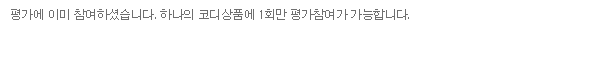
<style>
.page{position:relative;width:594px;height:66px;background:#ffffff}
.page>*{position:absolute;margin:0}
.t1{font:12px "Dotum";letter-spacing:-0.05em;color:#6f6f6f}
</style>
<div class="page">
<p class="t1" style="left:11px;top:9px;width:398px;height:11px">평가에 이미 참여하셨습니다. 하나의 코디상품에 1회만 평가참여가 가능합니다.</p>
</div>
